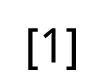
<style>
.page{position:relative;width:105px;height:83px;background:#ffffff}
.page>*{position:absolute;margin:0}
.t1{font:47.9px "DroidSans";color:#000000}
</style>
<div class="page">
<p class="t1" style="left:28px;top:28px;width:48px;height:42px">[1]</p>
</div>
